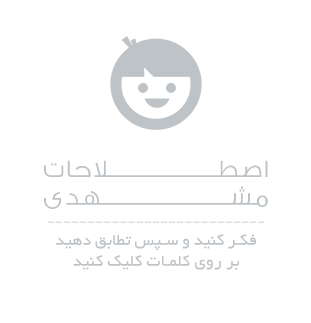
<style>
.page{position:relative;width:311px;height:323px;background:#ffffff}
.page>*{position:absolute;margin:0}
.t1{font:25.1px/13.8px "FarTwoLight";letter-spacing:0.02em;color:#bdc3c7;scale:1.03 1}
.t2{font:11.8px "FarTwoLight";letter-spacing:0.02em;scale:1.03 1}
.t3{font:17.3px "BYekan";letter-spacing:0.02em;color:#bdc3c7;scale:1.03 1}
</style>
<div class="page">
<p class="t1" style="left:44px;top:160px;width:224px;height:49px;text-align:center">اصطـــــــــــــــــــلاحات<br> مشـــــــــــــــــــــــهدی</p>
<p class="t2" style="left:47px;top:221px;width:218px;height:2px">-------------------------------</p>
<p class="t3" style="left:56px;top:234px;width:200px;height:17px">فکر کنید و سپس تطابق دهید</p>
<p class="t3" style="left:73px;top:255px;width:166px;height:15px">بر روی کلمات کلیک کنید</p>
</div>
